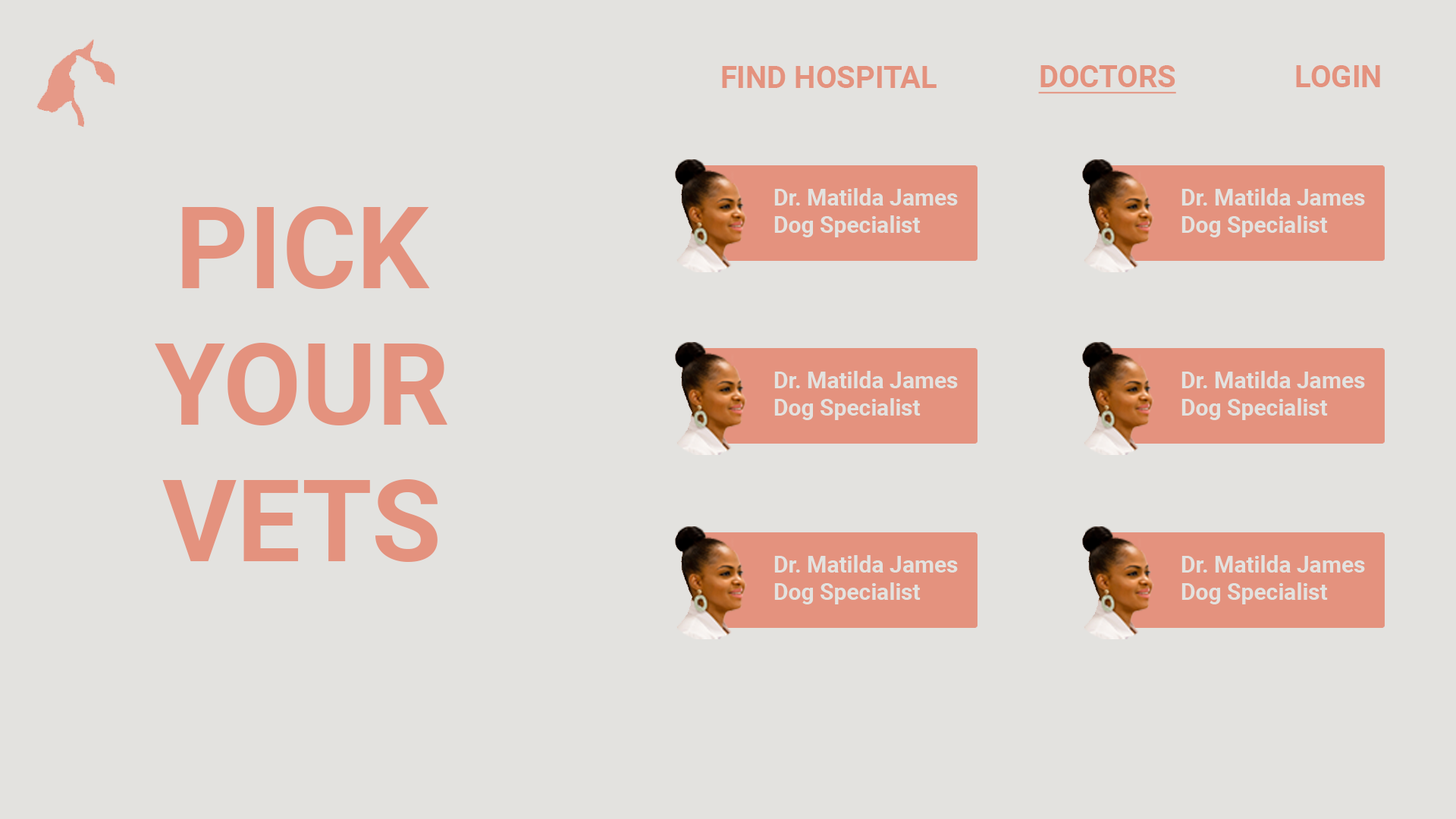
<style>
.page{position:relative;width:1456px;height:819px;background:#e3e2df}
.page>*{position:absolute;margin:0}
.t1{font:30.3px "Roboto-Bold";color:#e4927e}
.t2{font:30.3px "Roboto-Bold";color:#e4927e;text-decoration:underline}
.t3{font:22.7px "Roboto-Bold";color:#e3e2df}
.t4{font:113.7px "Roboto-Bold";color:#e4927e}
</style>
<div class="page">
<p class="t1" style="left:722px;top:66px;width:215px;height:22px">FIND HOSPITAL</p>
<p class="t2" style="left:1038px;top:65px;width:138px;height:29px">DOCTORS</p>
<p class="t1" style="left:1296px;top:65px;width:84px;height:22px">LOGIN</p>
<p class="t3" style="left:774px;top:188px;width:184px;height:49px">Dr. Matilda James<br>Dog Specialist</p>
<p class="t3" style="left:1181px;top:188px;width:184px;height:49px">Dr. Matilda James<br>Dog Specialist</p>
<p class="t4" style="left:155px;top:206px;width:292px;height:356px;text-align:center">PICK<br>YOUR  <br>VETS</p>
<p class="t3" style="left:774px;top:371px;width:184px;height:49px">Dr. Matilda James<br>Dog Specialist</p>
<p class="t3" style="left:1181px;top:371px;width:184px;height:49px">Dr. Matilda James<br>Dog Specialist</p>
<p class="t3" style="left:774px;top:555px;width:184px;height:49px">Dr. Matilda James<br>Dog Specialist</p>
<p class="t3" style="left:1181px;top:555px;width:184px;height:49px">Dr. Matilda James<br>Dog Specialist</p>
</div>
